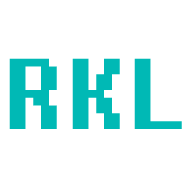
<style>
.page{position:relative;width:192px;height:192px;background:#ffffff}
.page>*{position:absolute;margin:0}
.t1{font:100px "Fixedsys";color:#00b9b5}
</style>
<div class="page">
<p class="t1" style="left:9px;top:58px;width:173px;height:71px">RKL</p>
</div>
